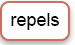
<style>
.page{position:relative;width:75px;height:45px;background:#ffffff}
.page>*{position:absolute;margin:0}
.t1{font:18px "ArialMT";color:#000000}
</style>
<div class="page">
<p class="t1" style="left:11px;top:13px;width:48px;height:17px">repels</p>
</div>
